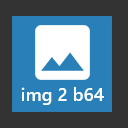
<style>
.page{position:relative;width:128px;height:128px;background:#333333}
.page>*{position:absolute;margin:0}
.t1{font:18px "SegoeUI-Semibold";color:#ffffff}
</style>
<div class="page">
<p class="t1" style="left:21px;top:87px;width:83px;height:18px">img 2 b64</p>
</div>
